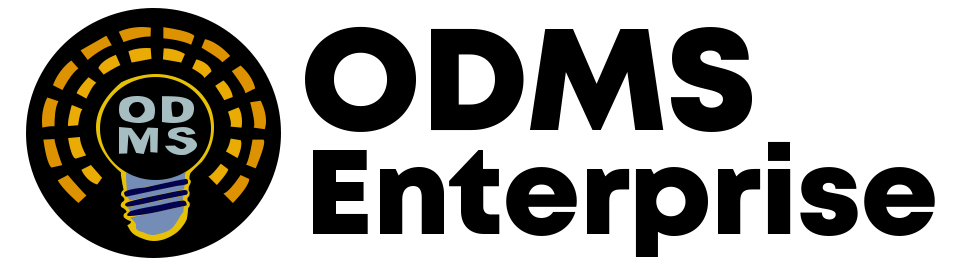
<style>
.page{position:relative;width:960px;height:266px;background:#ffffff}
.page>*{position:absolute;margin:0}
.t1{font:144px "Mont-HeavyDEMO";letter-spacing:0.01em;color:#000000}
.t2{font:120px "Mont-HeavyDEMO";letter-spacing:0.01em;color:#000000}
</style>
<div class="page">
<p class="t1" style="left:305px;top:26px;width:447px;height:106px">ODMS</p>
<p class="t2" style="left:313px;top:141px;width:622px;height:116px">Enterprise</p>
</div>
